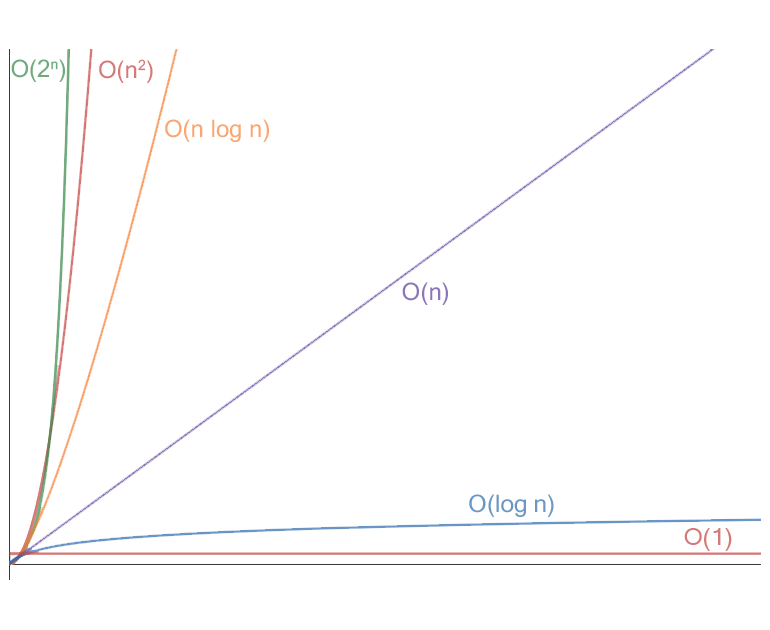
<style>
.page{position:relative;width:770px;height:630px;background:#ffffff}
.page>*{position:absolute;margin:0}
.t1{font:24px "MicrosoftSansSerif";color:#6fa97c}
.t2{font:24px "MicrosoftSansSerif";color:#d47a78}
.t3{font:24px "MicrosoftSansSerif";color:#faa672}
.t4{font:24px "MicrosoftSansSerif";color:#8b76bb}
.t5{font:24px "MicrosoftSansSerif";color:#6b97c5}
.t6{font:24px "MicrosoftSansSerif";color:#d47a78;scale:1.03 1}
</style>
<div class="page">
<p class="t1" style="left:11px;top:59px;width:54px;height:23px">O(2n)</p>
<p class="t2" style="left:99px;top:59px;width:54px;height:24px">O(n2)</p>
<p class="t3" style="left:165px;top:119px;width:104px;height:23px">O(n log n)</p>
<p class="t4" style="left:402px;top:282px;width:46px;height:23px">O(n)</p>
<p class="t5" style="left:469px;top:494px;width:85px;height:23px">O(log n)</p>
<p class="t6" style="left:684px;top:528px;width:48px;height:23px">O(1)</p>
</div>
